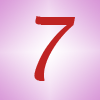
<style>
.page{position:relative;width:100px;height:100px}
.page>*{position:absolute;margin:0}
.t1{font:83.3px "LucidaHandwriting-Italic";color:#bf2323}
</style>
<div class="page">
<p class="t1" style="left:34px;top:16px;width:41px;height:65px">7</p>
</div>
